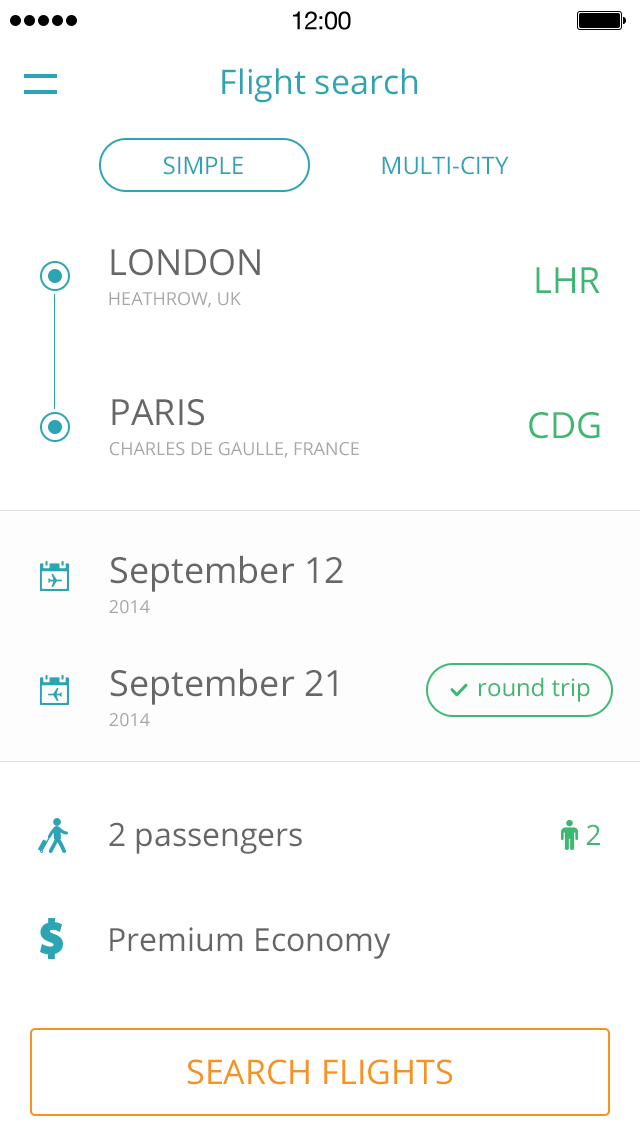
<style>
.page{position:relative;width:640px;height:1136px;background:#ffffff}
.page>*{position:absolute;margin:0}
.t1{font:25px "HelveticaNeue";letter-spacing:-0.02em;color:#000000}
.t2{font:34px "OpenSans";color:#2ca4b4}
.t3{font:24px "OpenSans";color:#2ca4b4;text-transform:uppercase}
.t4{font:18px/30px "OpenSans";color:#a6a6a6;text-transform:uppercase}
.t5{font:36px "OpenSans";color:#666666;text-transform:uppercase}
.t6{font:36px "OpenSans";color:#3db872}
.t7{font:36px "OpenSans";color:#666767}
.t8{font:18px/30px "OpenSans";color:#a6a6a6}
.t9{font:24px "OpenSans";color:#3db872}
.t10{font:32px "OpenSans";color:#666666}
.t11{font:28px "OpenSans";color:#3cb872}
.t12{font:34px "OpenSans";color:#f7931d;text-transform:uppercase}
</style>
<div class="page">
<p class="t1" style="left:293px;top:11px;width:58px;height:19px">12:00</p>
<p class="t2" style="left:222px;top:68px;width:195px;height:35px">Flight search</p>
<p class="t3" style="left:163px;top:156px;width:80px;height:19px">simple</p>
<p class="t3" style="left:382px;top:156px;width:127px;height:19px">multi-city</p>
<p class="t4" style="left:109px;top:249px;width:151px;height:59px"><span class="t5">LONDON<br></span>heathrow, uk</p>
<p class="t6" style="left:536px;top:267px;width:64px;height:26px">LHR</p>
<p class="t4" style="left:109px;top:399px;width:250px;height:59px"><span class="t5">paris<br></span>charles de gaulle, france</p>
<p class="t6" style="left:529px;top:412px;width:71px;height:27px">CDG</p>
<p class="t7" style="left:109px;top:555px;width:234px;height:59px">September 12<br><span class="t8">2014</span></p>
<p class="t7" style="left:109px;top:668px;width:228px;height:59px">September 21<br><span class="t8">2014</span></p>
<p class="t9" style="left:479px;top:677px;width:111px;height:25px">round trip</p>
<p class="t10" style="left:109px;top:822px;width:193px;height:32px">2 passengers</p>
<p class="t11" style="left:586px;top:824px;width:14px;height:21px">2</p>
<p class="t10" style="left:110px;top:927px;width:281px;height:32px">Premium Economy</p>
<p class="t12" style="left:187px;top:1059px;width:265px;height:26px">Search flights</p>
</div>
